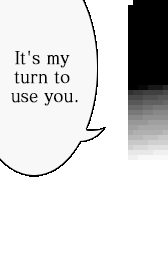
<style>
.page{position:relative;width:168px;height:256px;background:#ffffff}
.page>*{position:absolute;margin:0}
.t1{font:17.6px "MatissePro-M";letter-spacing:-0.01em;color:#000000;font-weight:bold;scale:0.91 1}
</style>
<div class="page">
<p class="t1" style="left:11px;top:50px;width:67px;height:56px;text-align:center">It's my<br>turn to<br> use you.</p>
</div>
